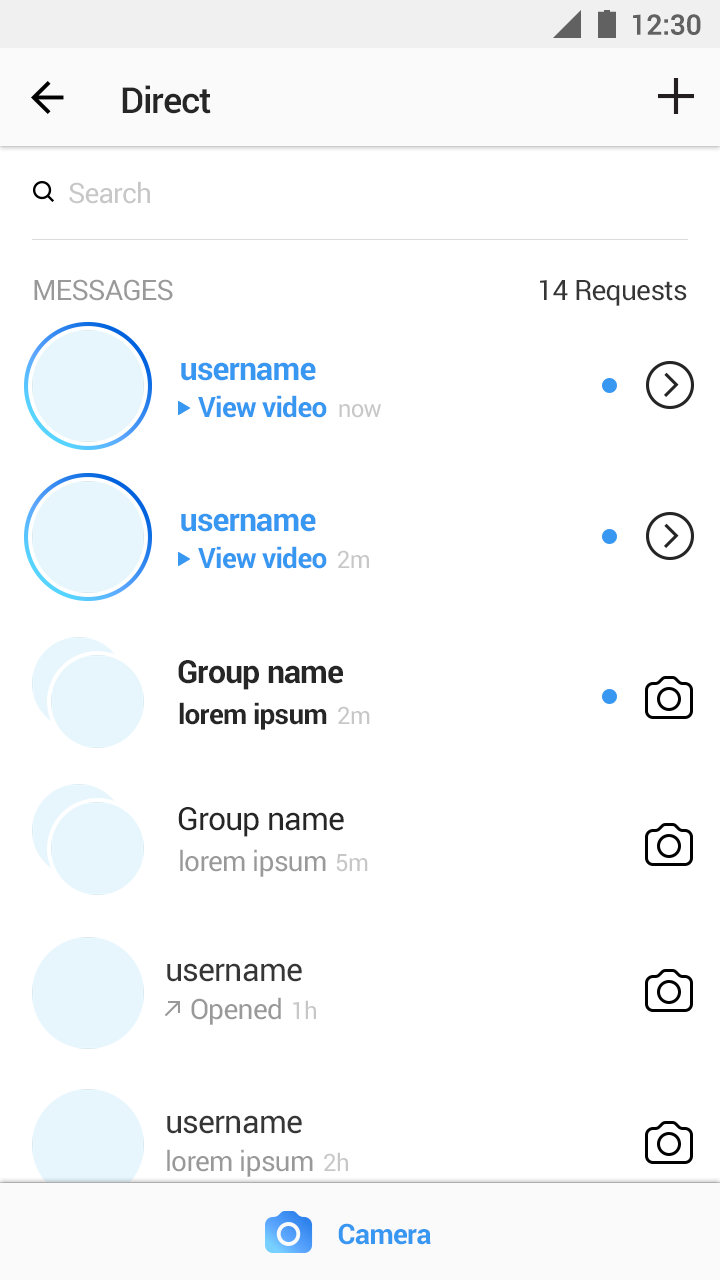
<style>
.page{position:relative;width:720px;height:1280px;background:#ffffff}
.page>*{position:absolute;margin:0}
.t1{font:28px "Roboto-Medium";color:#616161}
.t2{font:36px "Roboto-Medium";letter-spacing:-0.025em;color:#262626}
.t3{font:27.9px "Roboto-Regular";letter-spacing:-0.025em;color:#c7c7c7}
.t4{font:28px "Roboto-Regular";letter-spacing:-0.025em;color:#999999}
.t5{font:28px "Roboto-Regular";letter-spacing:-0.025em;color:#363636}
.t6{font:32px "Roboto-Bold";letter-spacing:-0.025em;color:#3897f0}
.t7{font:28px "Roboto-Bold";letter-spacing:-0.025em;color:#3897f0}
.t8{font:24px "Roboto-Regular";letter-spacing:-0.025em;color:#c7c7c7}
.t9{font:32px "Roboto-Bold";letter-spacing:-0.025em;color:#262626}
.t10{font:28px "Roboto-Bold";letter-spacing:-0.025em;color:#262626}
.t11{font:32px "Roboto-Regular";letter-spacing:-0.025em;color:#262626}
.t12{font:32px "Roboto-Regular";letter-spacing:-0.025em;color:#363636}
</style>
<div class="page">
<p class="t1" style="left:633px;top:14px;width:68px;height:21px">12:30</p>
<p class="t2" style="left:122px;top:85px;width:89px;height:29px">Direct</p>
<p class="t3" style="left:69px;top:181px;width:81px;height:23px">Search</p>
<p class="t4" style="left:34px;top:279px;width:139px;height:22px">MESSAGES</p>
<p class="t5" style="left:540px;top:280px;width:147px;height:26px">14 Requests</p>
<p class="t6" style="left:181px;top:362px;width:135px;height:19px">username</p>
<p class="t7" style="left:198px;top:395px;width:129px;height:23px">View video</p>
<p class="t8" style="left:339px;top:404px;width:42px;height:14px">now</p>
<p class="t6" style="left:181px;top:513px;width:135px;height:19px">username</p>
<p class="t7" style="left:198px;top:546px;width:129px;height:23px">View video</p>
<p class="t8" style="left:338px;top:550px;width:31px;height:18px">2m</p>
<p class="t9" style="left:178px;top:660px;width:165px;height:30px">Group name</p>
<p class="t10" style="left:179px;top:702px;width:148px;height:28px">lorem ipsum</p>
<p class="t8" style="left:338px;top:706px;width:32px;height:18px">2m</p>
<p class="t11" style="left:178px;top:807px;width:166px;height:30px">Group name</p>
<p class="t4" style="left:180px;top:849px;width:146px;height:28px">lorem ipsum</p>
<p class="t8" style="left:336px;top:854px;width:32px;height:18px">5m</p>
<p class="t12" style="left:167px;top:963px;width:135px;height:19px">username</p>
<p class="t4" style="left:191px;top:997px;width:90px;height:28px">Opened</p>
<p class="t8" style="left:293px;top:1000px;width:23px;height:19px">1h</p>
<p class="t12" style="left:167px;top:1115px;width:135px;height:19px">username</p>
<p class="t4" style="left:167px;top:1149px;width:146px;height:28px">lorem ipsum</p>
<p class="t8" style="left:324px;top:1152px;width:24px;height:19px">2h</p>
<p class="t7" style="left:338px;top:1223px;width:93px;height:22px">Camera</p>
</div>
